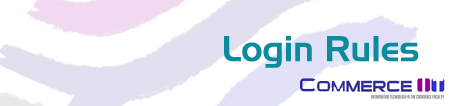
<style>
.page{position:relative;width:453px;height:106px;background:#ffffff}
.page>*{position:absolute;margin:0}
.t1{font:36px "Slicker";color:#0c8b9d}
</style>
<div class="page">
<p class="t1" style="left:224px;top:36px;width:195px;height:32px">Login Rules</p>
</div>
